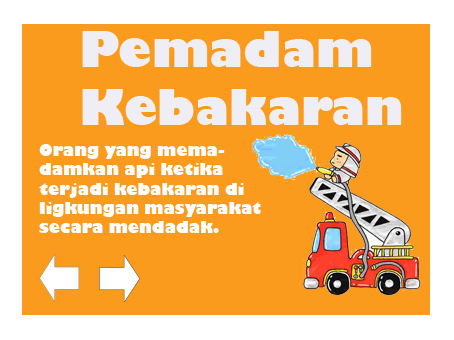
<style>
.page{position:relative;width:454px;height:340px;background:#fb9b1e}
.page>*{position:absolute;margin:0}
.t1{font:48px "GillSans-UltraBold";color:#f0eef5}
.t2{font:16px "GillSans-UltraBold";color:#ffffff}
</style>
<div class="page">
<p class="t1" style="left:82px;top:31px;width:320px;height:94px">Pemadam <br>Kebakaran</p>
<p class="t2" style="left:38px;top:144px;width:223px;height:89px">Orang yang mema-<br>damkan api ketika <br>terjadi kebakaran di <br>ligkungan masyarakat<br>secara mendadak.</p>
</div>
